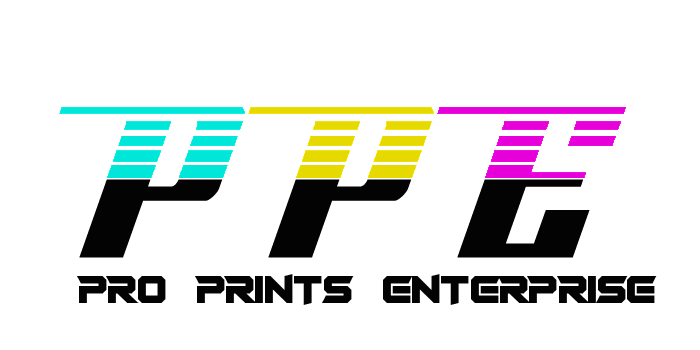
<style>
.page{position:relative;width:700px;height:350px;background:#ffffff}
.page>*{position:absolute;margin:0}
.t1{font:40px "RocketRinder";color:#030303}
</style>
<div class="page">
<p class="t1" style="left:77px;top:274px;width:580px;height:31px">PRO   PRINTS   ENTERPRISE</p>
</div>
